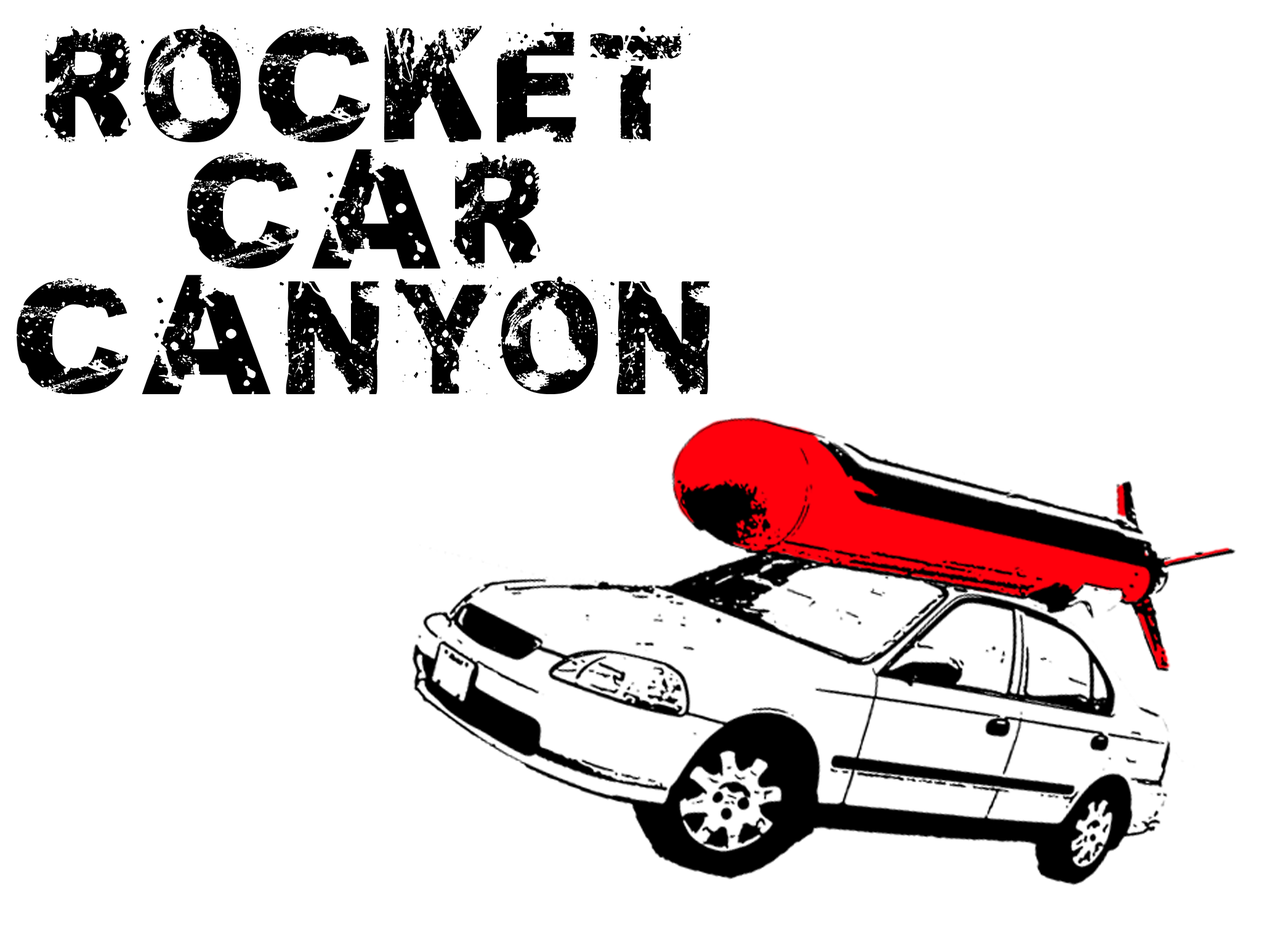
<style>
.page{position:relative;width:1261px;height:946px;background:#ffffff}
.page>*{position:absolute;margin:0}
.t1{font:131.5px/126px "SoulMission";letter-spacing:0.075em;color:#000000}
</style>
<div class="page">
<p class="t1" style="left:17px;top:22px;width:693px;height:372px;text-align:center">ROCKET<br>CAR<br>CANYON</p>
</div>
